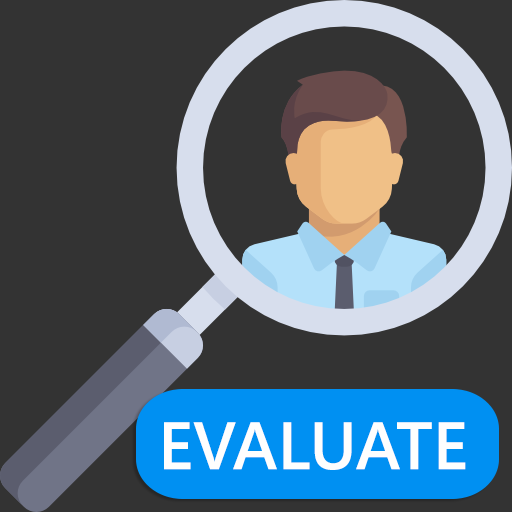
<style>
.page{position:relative;width:512px;height:512px;background:#333333}
.page>*{position:absolute;margin:0}
.t1{font:67.4px "SegoeUI-Semibold";color:#fefefe}
</style>
<div class="page">
<p class="t1" style="left:164px;top:422px;width:302px;height:48px">EVALUATE</p>
</div>
